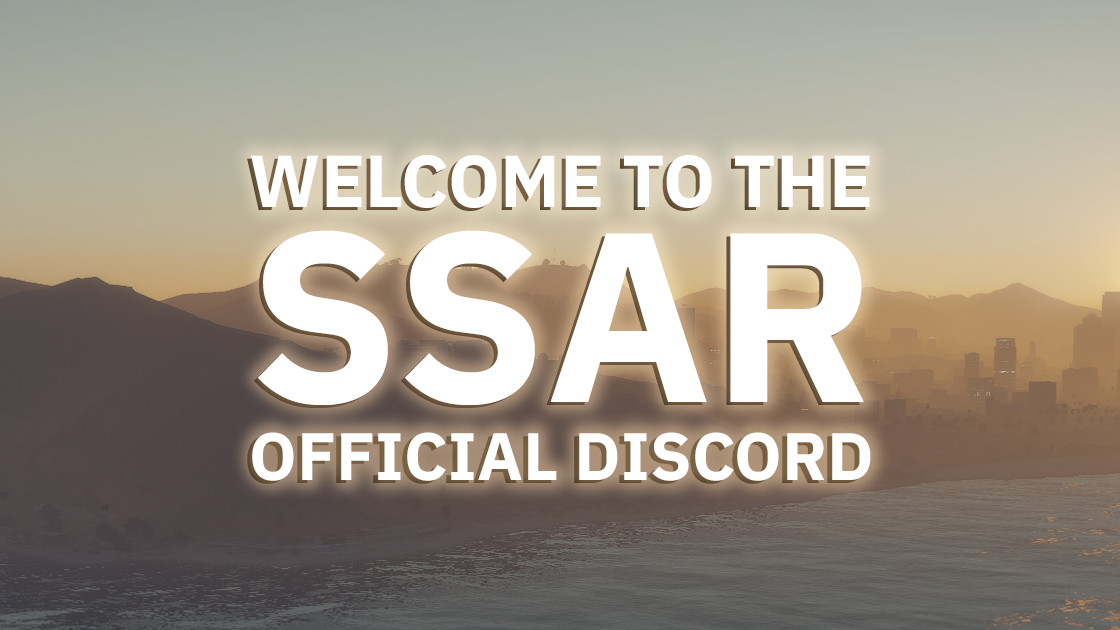
<style>
.page{position:relative;width:1120px;height:630px}
.page>*{position:absolute;margin:0}
.t1{font:73.3px "IBMPlexSans-Bold";color:#ffffff}
.t2{font:241.3px "IBMPlexSans-Bold";color:#ffffff}
.t3{font:67.1px "IBMPlexSans-Bold";color:#ffffff}
</style>
<div class="page">
<p class="t1" style="left:251px;top:155px;width:619px;height:53px">WELCOME TO THE</p>
<p class="t2" style="left:258px;top:230px;width:606px;height:175px">SSAR</p>
<p class="t3" style="left:252px;top:432px;width:619px;height:49px">OFFICIAL DISCORD</p>
</div>
